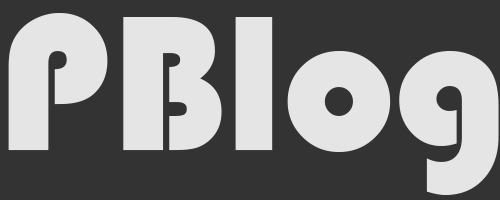
<style>
.page{position:relative;width:500px;height:200px;background:#333333}
.page>*{position:absolute;margin:0}
.t1{font:200px "Bauhaus93";color:#e5e5e5}
</style>
<div class="page">
<p class="t1" style="left:8px;top:13px;width:491px;height:182px">PBlog</p>
</div>
